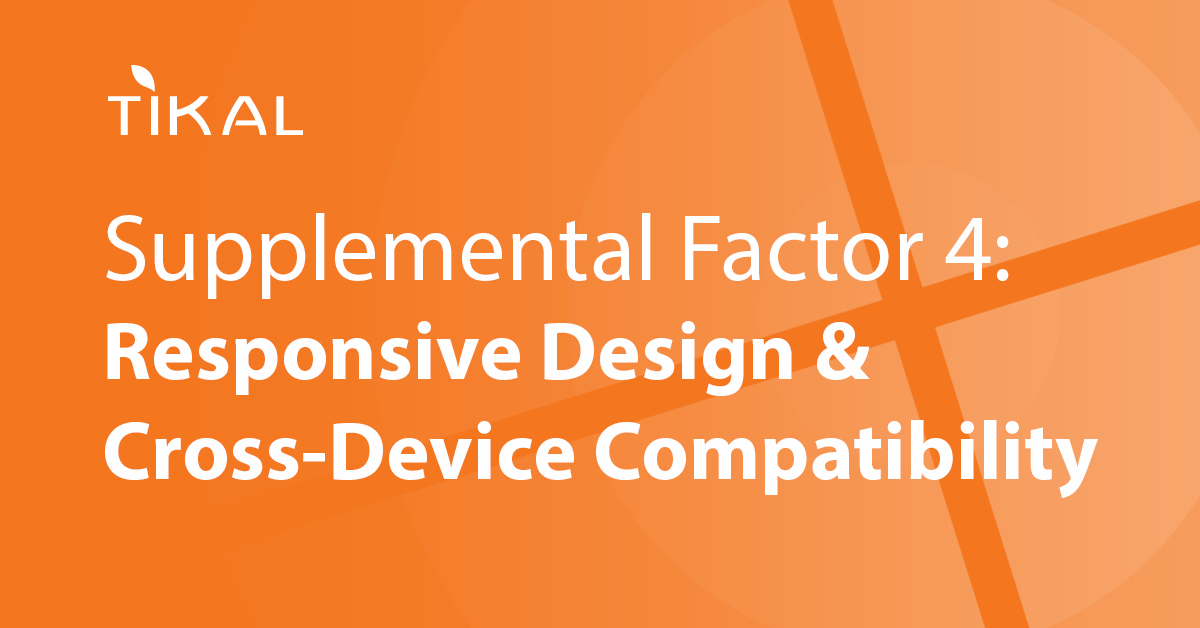
<style>
.page{position:relative;width:1200px;height:628px;background:#f47720}
.page>*{position:absolute;margin:0}
.t1{font:83px "MyriadPro-Bold";color:#fefefe}
.t2{font:95px "MyriadPro-Regular";color:#fefefe}
</style>
<div class="page">
<p class="t1" style="left:105px;top:213px;width:993px;height:285px"><span class="t2">Supplemental Factor 4: </span>Responsive Design &amp; Cross-Device Compatibility</p>
</div>
